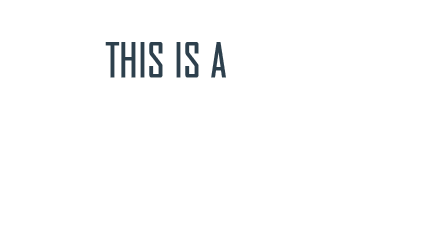
<style>
.page{position:relative;width:438px;height:226px;background:#ffffff}
.page>*{position:absolute;margin:0}
.t1{font:46.5px "AgencyFB-Reg";color:#2d404d;font-weight:bold;scale:0.87 1}
</style>
<div class="page">
<p class="t1" style="left:105px;top:42px;width:121px;height:36px">THIS IS A</p>
</div>
